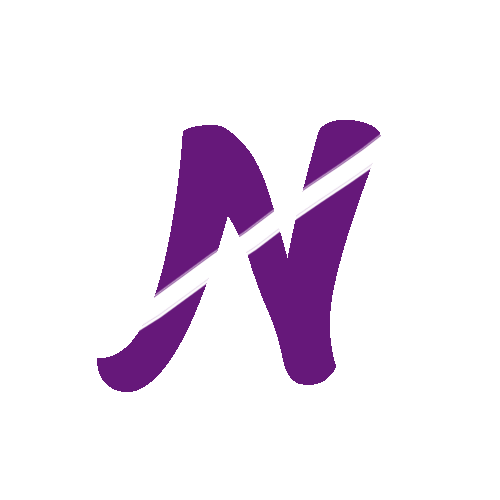
<style>
.page{position:relative;width:500px;height:500px;background:#ffffff}
.page>*{position:absolute;margin:0}
.t1{font:366.7px "Billyer";color:#66187a;text-transform:uppercase}
</style>
<div class="page">
<p class="t1" style="left:97px;top:120px;width:284px;height:272px">N</p>
</div>
